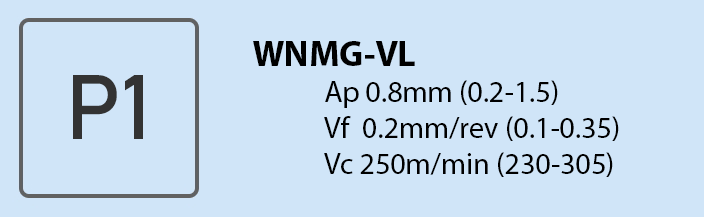
<style>
.page{position:relative;width:704px;height:217px;background:#d0e5f8}
.page>*{position:absolute;margin:0}
.t1{font:30px "MyriadPro-Regular";color:#000000}
.t2{font:36px "MyriadPro-Bold";color:#000000}
</style>
<div class="page">
<p class="t1" style="left:253px;top:41px;width:366px;height:136px"><span class="t2">WNMG-VL<br></span>  Ap 0.8mm (0.2-1.5)<br>  Vf  0.2mm/rev (0.1-0.35)<br>  Vc 250m/min (230-305)</p>
</div>
